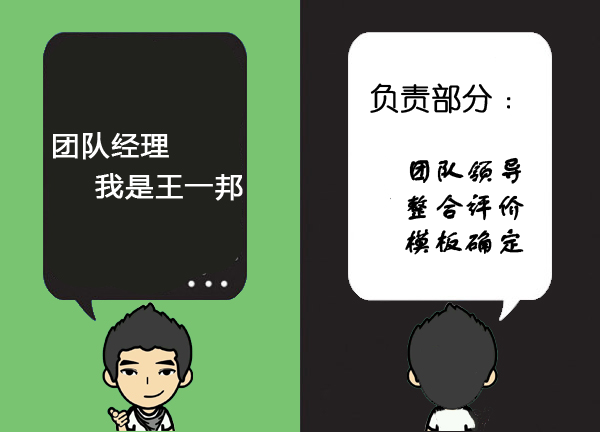
<style>
.page{position:relative;width:600px;height:432px;background:#79c471}
.page>*{position:absolute;margin:0}
.t1{font:30px/60px "FZSTK--GBK1-0";color:#000000;font-weight:bold}
.t2{font:30px/60px "YouYuan";color:#000000;font-weight:bold}
.t3{font:30px/60px "SentyMARUKO-Elementary";color:#000000;font-weight:bold}
</style>
<div class="page">
<p class="t1" style="left:370px;top:83px;width:154px;height:172px"><span class="t2">负责部分</span><span class="t3">：<br></span><br>    团队领导<br>    整合评价<br>    模板确定</p>
</div>
